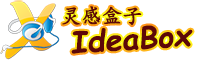
<style>
.page{position:relative;width:200px;height:60px;background:#ffffff}
.page>*{position:absolute;margin:0}
.t1{font:20px "KaiTi";color:#5d0808;font-weight:bold}
.t2{font:30px "ComicSansMS-Bold";color:#5d0808}
</style>
<div class="page">
<p class="t1" style="left:62px;top:6px;width:80px;height:20px">灵感盒子</p>
<p class="t2" style="left:71px;top:25px;width:122px;height:29px;rotate:-4deg">IdeaBox</p>
</div>
